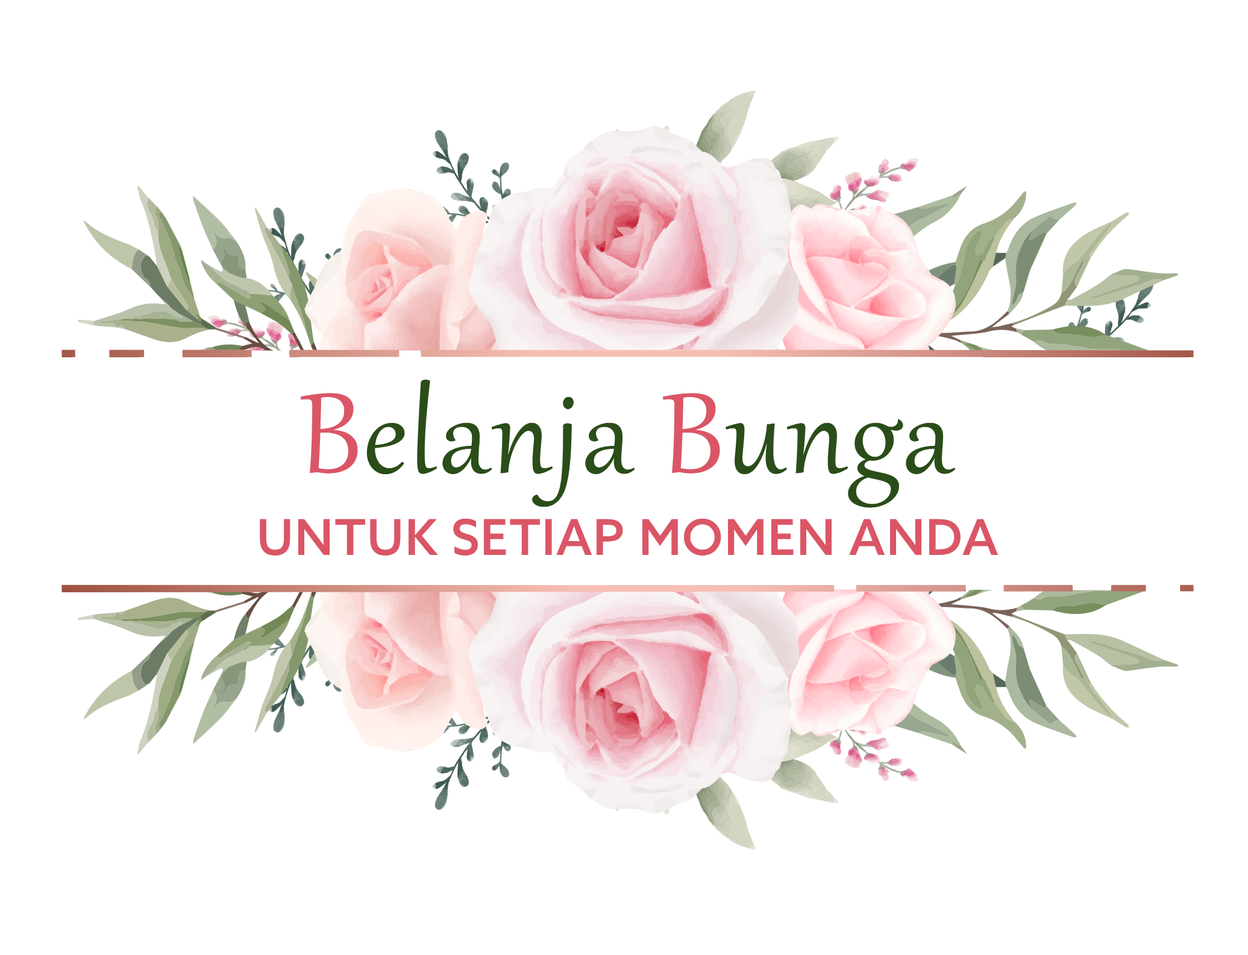
<style>
.page{position:relative;width:1248px;height:955px;background:#ffffff}
.page>*{position:absolute;margin:0}
.t1{font:139.5px "Gabriola";letter-spacing:0.02em;color:#2b4d19}
.t2{font:139.5px "Gabriola";letter-spacing:0.02em;color:#da5666}
.t3{font:49.7px "AzoSans-Medium";letter-spacing:0.02em;color:#da5666}
</style>
<div class="page">
<p class="t1" style="left:301px;top:380px;width:655px;height:128px"><span class="t2">B</span>elanja <span class="t2">B</span>unga</p>
<p class="t3" style="left:260px;top:518px;width:738px;height:38px">UNTUK SETIAP MOMEN ANDA</p>
</div>
